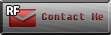
<style>
.page{position:relative;width:111px;height:35px}
.page>*{position:absolute;margin:0}
.t1{font:12px "MyriadPro-Bold";color:#ffffff}
.t2{font:10px "Fixedsys"}
</style>
<div class="page">
<p class="t1" style="left:6px;top:6px;width:14px;height:9px">RF</p>
<p class="t2" style="left:42px;top:13px;width:62px;height:7px">Contact Me</p>
</div>
